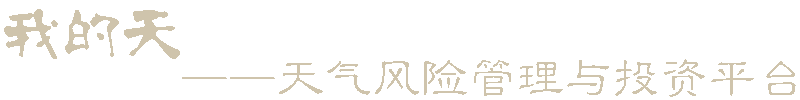
<style>
.page{position:relative;width:800px;height:100px;background:#ffffff}
.page>*{position:absolute;margin:0}
.t1{font:60px "-";color:#cfc4ac}
.t2{font:48px "CloudLiBianGBK";color:#cfc4ac}
</style>
<div class="page">
<p class="t1" style="left:4px;top:9px;width:176px;height:50px">我的天</p>
<p class="t2" style="left:182px;top:59px;width:614px;height:38px">——天气风险管理与投资平台</p>
</div>
